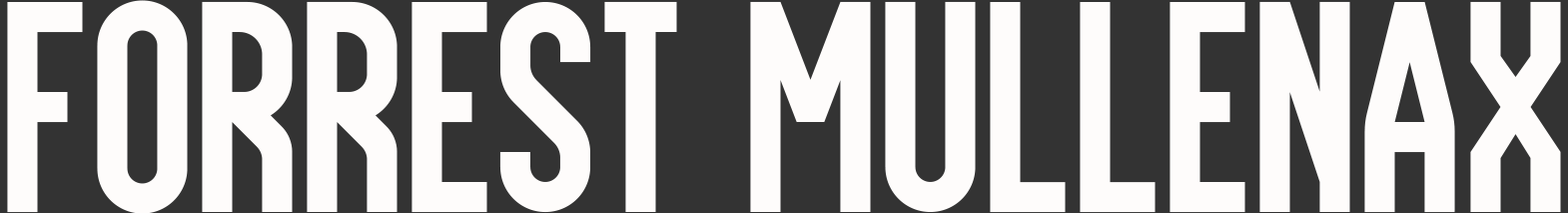
<style>
.page{position:relative;width:1568px;height:213px;background:#fefcfb}
.page>*{position:absolute;margin:0}
.t1{font:299.6px "FrederickSansRegular";color:#fefcfb}
</style>
<div class="page">
<p class="t1" style="left:7px;top:0px;width:1554px;height:214px">Forrest Mullenax</p>
</div>
